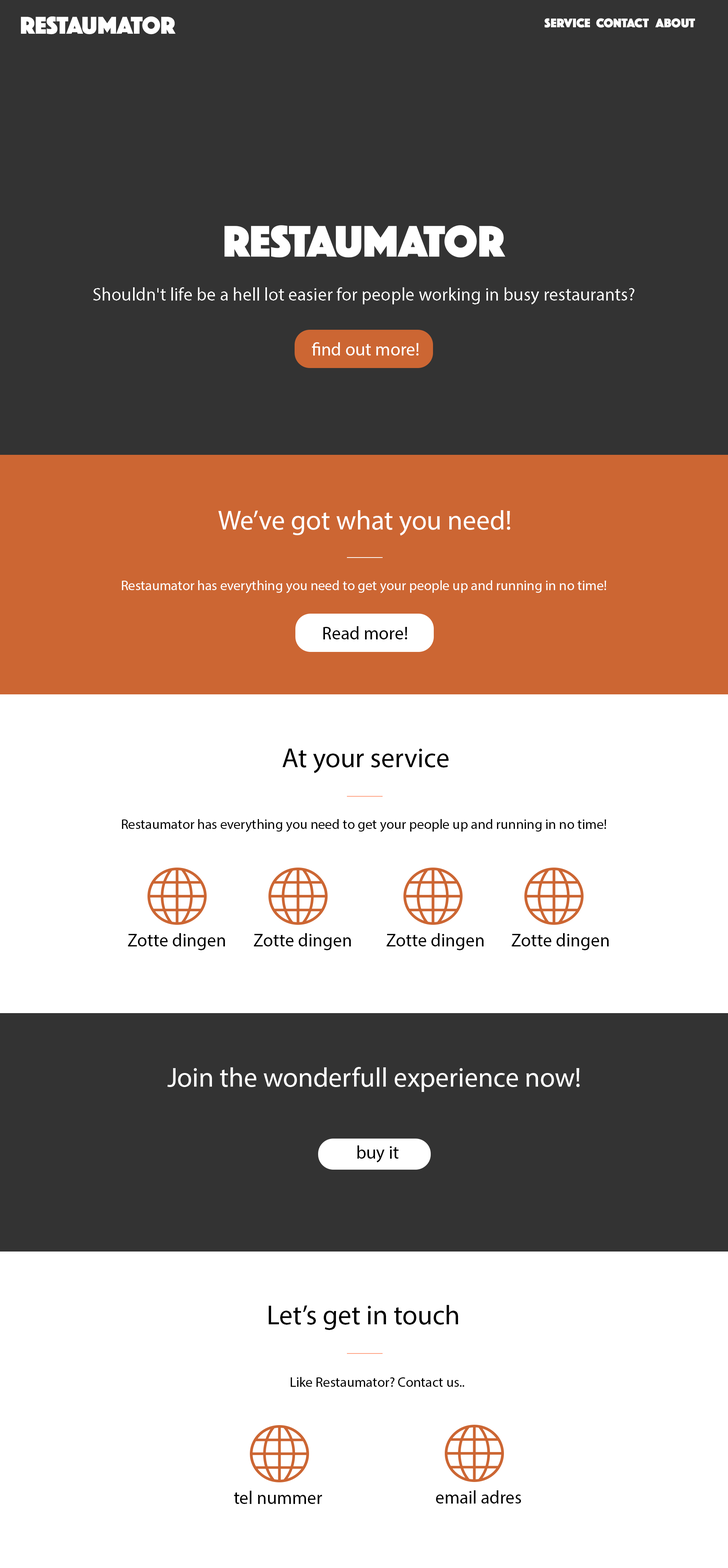
<style>
.page{position:relative;width:728px;height:1568px;background:#333333}
.page>*{position:absolute;margin:0}
.t1{font:25.3px "Phosphate-Solid";color:#ffffff}
.t2{font:13.1px "Phosphate-Solid";color:#ffffff}
.t3{font:46px "Phosphate-Solid";color:#ffffff}
.t4{font:18.2px "MyriadPro-Regular";color:#ffffff}
.t5{font:27.3px "MyriadPro-Regular";color:#ffffff}
.t6{font:13.8px "MyriadPro-Regular";color:#ffffff}
.t7{font:18.2px "MyriadPro-Regular";color:#000000}
.t8{font:27.3px "MyriadPro-Regular";color:#000000}
.t9{font:13.8px "MyriadPro-Regular";color:#000000}
</style>
<div class="page">
<p class="t1" style="left:21px;top:16px;width:154px;height:18px">RESTAUMATOR</p>
<p class="t2" style="left:544px;top:18px;width:46px;height:10px">SERVICE</p>
<p class="t2" style="left:596px;top:18px;width:53px;height:10px">CONTACT</p>
<p class="t2" style="left:655px;top:18px;width:40px;height:10px">About</p>
<p class="t3" style="left:224px;top:225px;width:281px;height:33px">RESTAUMATOR</p>
<p class="t4" style="left:93px;top:287px;width:541px;height:17px">Shouldn't life be a hell lot easier for people working in busy restaurants?</p>
<p class="t4" style="left:312px;top:342px;width:106px;height:14px">find out more!</p>
<p class="t5" style="left:218px;top:510px;width:292px;height:26px">We’ve got what you need!</p>
<p class="t6" style="left:122px;top:580px;width:484px;height:13px">Restaumator has everything you need to get your people up and running in no time!</p>
<p class="t7" style="left:323px;top:626px;width:84px;height:13px">Read more!</p>
<p class="t8" style="left:282px;top:749px;width:166px;height:24px">At your service</p>
<p class="t9" style="left:122px;top:819px;width:484px;height:13px">Restaumator has everything you need to get your people up and running in no time!</p>
<p class="t7" style="left:128px;top:933px;width:97px;height:17px">Zotte dingen</p>
<p class="t7" style="left:254px;top:933px;width:97px;height:17px">Zotte dingen</p>
<p class="t7" style="left:386px;top:933px;width:98px;height:17px">Zotte dingen</p>
<p class="t7" style="left:511px;top:933px;width:98px;height:17px">Zotte dingen</p>
<p class="t5" style="left:167px;top:1067px;width:413px;height:25px">Join the wonderfull experience now!</p>
<p class="t7" style="left:357px;top:1145px;width:41px;height:17px">buy it</p>
<p class="t8" style="left:268px;top:1305px;width:190px;height:25px">Let’s get in touch</p>
<p class="t9" style="left:290px;top:1377px;width:174px;height:10px">Like Restaumator? Contact us..</p>
<p class="t7" style="left:234px;top:1491px;width:88px;height:13px">tel nummer</p>
<p class="t7" style="left:436px;top:1490px;width:85px;height:14px">email adres</p>
</div>
